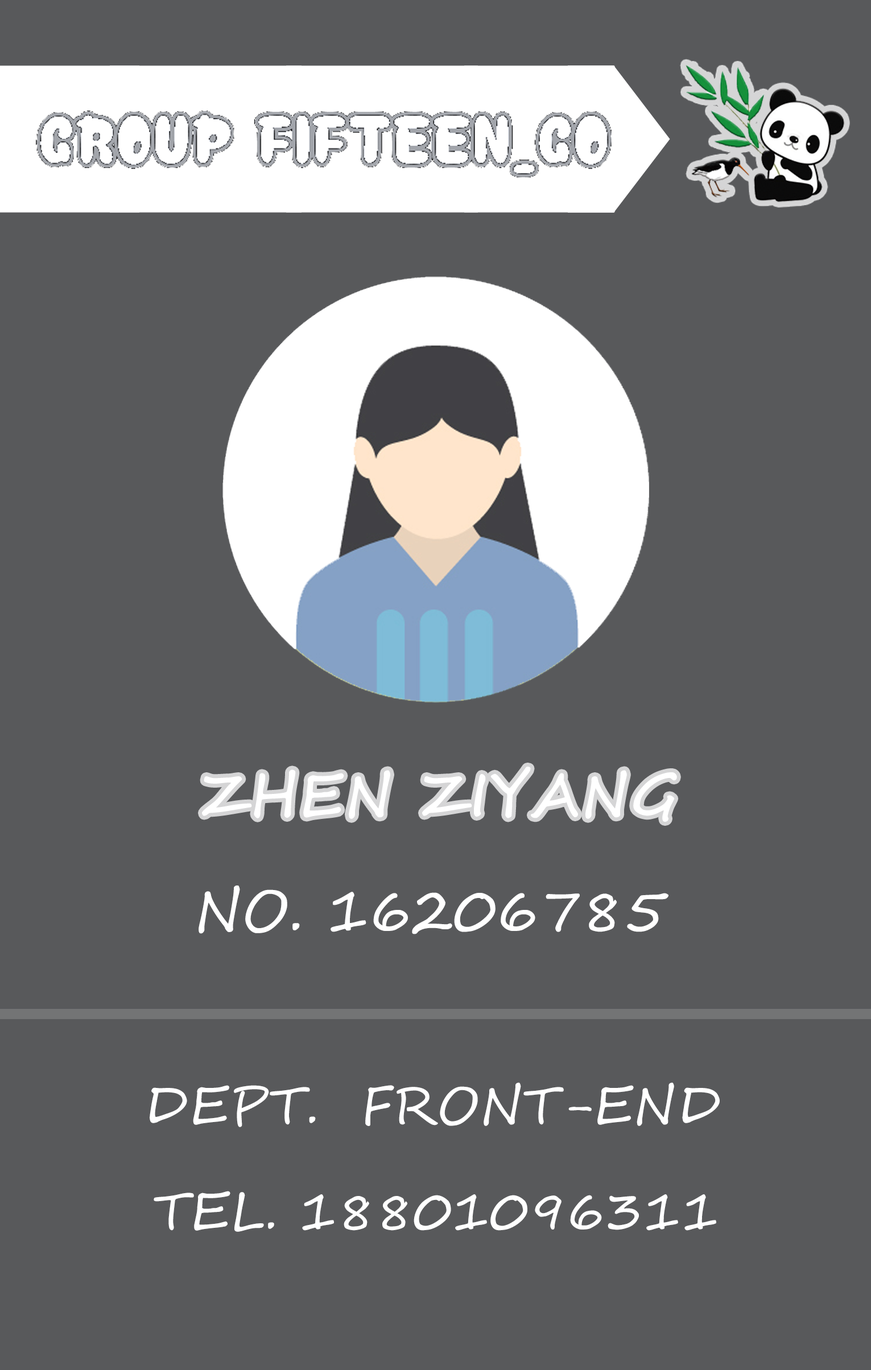
<style>
.page{position:relative;width:871px;height:1370px;background:#58595b}
.page>*{position:absolute;margin:0}
.t1{font:58px "SegoeScript";color:#ffffff;font-weight:bold}
.t2{font:58px "SegoeScript";color:#ffffff}
.t3{font:52.3px "SegoeScript";color:#ffffff}
</style>
<div class="page">
<p class="t1" style="left:202px;top:766px;width:475px;height:56px">ZHEN ZIYANG</p>
<p class="t2" style="left:198px;top:885px;width:470px;height:49px">NO. 16206785</p>
<p class="t3" style="left:150px;top:1082px;width:569px;height:45px">DEPT.  FRONT-END</p>
<p class="t3" style="left:154px;top:1191px;width:562px;height:41px">TEL. 18801096311</p>
</div>
